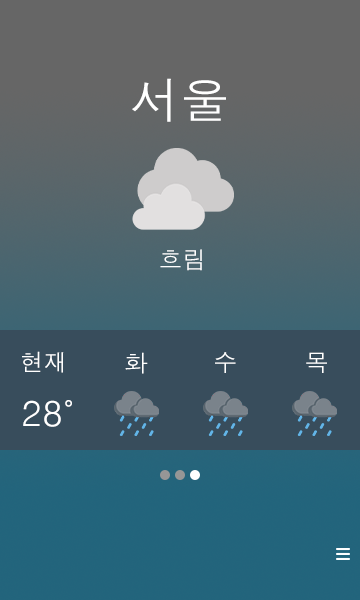
<style>
.page{position:relative;width:360px;height:600px}
.page>*{position:absolute;margin:0}
.t1{font:50px "Dotum";color:#ffffff}
.t2{font:24px "Dotum";color:#ffffff}
.t3{font:36px "Dotum";color:#ffffff}
</style>
<div class="page">
<p class="t1" style="left:132px;top:78px;width:94px;height:44px">서울</p>
<p class="t2" style="left:160px;top:249px;width:42px;height:22px">흐림</p>
<p class="t2" style="left:22px;top:351px;width:42px;height:22px">현재</p>
<p class="t2" style="left:125px;top:352px;width:23px;height:22px">화</p>
<p class="t2" style="left:215px;top:352px;width:21px;height:21px">수</p>
<p class="t2" style="left:306px;top:352px;width:21px;height:21px">목</p>
<p class="t3" style="left:23px;top:400px;width:49px;height:27px">28˚</p>
</div>
